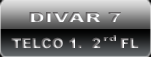
<style>
.page{position:relative;width:151px;height:57px}
.page>*{position:absolute;margin:0}
.t1{font:14px "Arial-Black";scale:1.51 1}
.t2{font:14px "Arial-Black"}
.t3{font:8px "Arial-Black";scale:1.51 1}
</style>
<div class="page">
<p class="t1" style="left:29px;top:12px;width:92px;height:10px">DIVAR 7</p>
<p class="t2" style="left:11px;top:37px;width:128px;height:12px">TELCO 1.  2    FL</p>
<p class="t3" style="left:103px;top:35px;width:13px;height:6px">rd</p>
</div>
